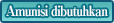
<style>
.page{position:relative;width:114px;height:23px;background:#115777}
.page>*{position:absolute;margin:0}
.t1{font:14px "RyuminPro-ExBold";letter-spacing:-0.08em;color:#ffffff;scale:0.9 1}
</style>
<div class="page">
<p class="t1" style="left:6px;top:5px;width:102px;height:12px">Amunisi dibutuhkan</p>
</div>
